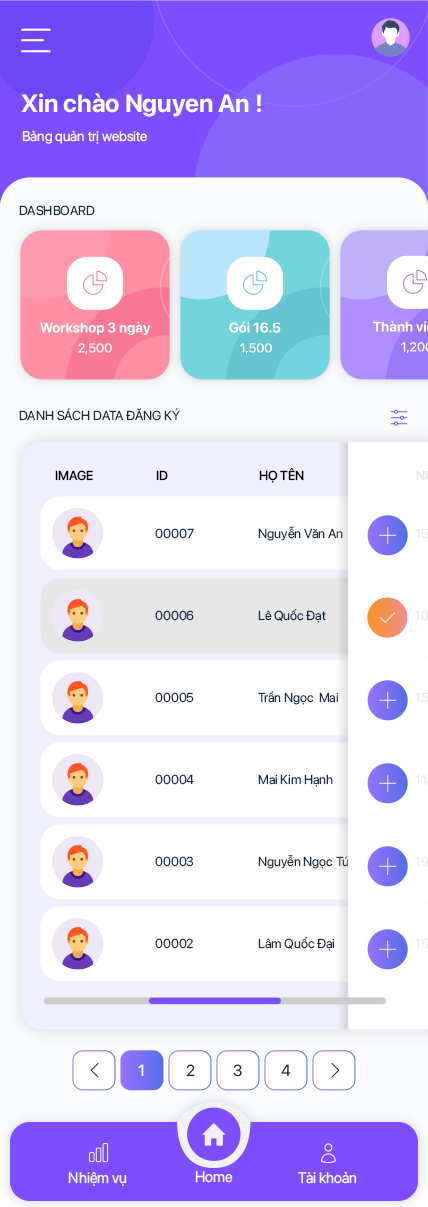
<style>
.page{position:relative;width:428px;height:1207px;background:#ffffff}
.page>*{position:absolute;margin:0}
.t1{font:25px "SFProDisplay-Bold";color:#ffffff}
.t2{font:14px "SFProDisplay-Regular";color:#ffffff}
.t3{font:13px "SFProDisplay-Regular";color:#172b4c}
.t4{font:13px "SFProDisplay-Medium";color:#000000}
.t5{font:15.9px "SFProDisplay-Regular";color:#ffffff}
.t6{font:15.9px "SFProDisplay-Regular";color:#172b4c}
.t7{font:15.3px "SFProDisplay-Regular";color:#fafcfe;scale:0.96 1}
</style>
<div class="page">
<p class="t1" style="left:21px;top:93px;width:240px;height:24px">Xin chào Nguyen An !</p>
<p class="t2" style="left:22px;top:130px;width:125px;height:14px">Bảng quản trị website</p>
<p class="t3" style="left:19px;top:205px;width:76px;height:11px">DASHBOARD</p>
<p class="t3" style="left:19px;top:408px;width:161px;height:13px">DANH SÁCH DATA ĐĂNG KÝ</p>
<p class="t4" style="left:55px;top:470px;width:38px;height:11px">IMAGE</p>
<p class="t4" style="left:156px;top:470px;width:12px;height:11px">ID</p>
<p class="t4" style="left:259px;top:468px;width:45px;height:15px">HỌ TÊN</p>
<p class="t3" style="left:155px;top:528px;width:39px;height:11px">00007</p>
<p class="t3" style="left:258px;top:526px;width:85px;height:15px">Nguyễn Văn An</p>
<p class="t3" style="left:155px;top:610px;width:39px;height:11px">00006</p>
<p class="t3" style="left:258px;top:609px;width:68px;height:14px">Lê Quốc Đạt</p>
<p class="t3" style="left:155px;top:692px;width:39px;height:11px">00005</p>
<p class="t3" style="left:258px;top:691px;width:81px;height:14px">Trần Ngọc  Mai</p>
<p class="t3" style="left:155px;top:774px;width:39px;height:11px">00004</p>
<p class="t3" style="left:258px;top:774px;width:75px;height:13px">Mai Kim Hạnh</p>
<p class="t3" style="left:155px;top:856px;width:39px;height:11px">00003</p>
<p class="t3" style="left:258px;top:855px;width:91px;height:14px">Nguyễn Ngọc Tú</p>
<p class="t3" style="left:155px;top:938px;width:38px;height:11px">00002</p>
<p class="t3" style="left:258px;top:937px;width:77px;height:14px">Lâm Quốc Đại</p>
<p class="t5" style="left:138px;top:1064px;width:6px;height:13px">1</p>
<p class="t6" style="left:186px;top:1064px;width:9px;height:13px">2</p>
<p class="t6" style="left:233px;top:1064px;width:9px;height:13px">3</p>
<p class="t6" style="left:281px;top:1064px;width:10px;height:13px">4</p>
<p class="t7" style="left:68px;top:1172px;width:59px;height:14px">Nhiệm vụ</p>
<p class="t7" style="left:195px;top:1171px;width:38px;height:12px">Home</p>
<p class="t7" style="left:298px;top:1171px;width:59px;height:13px">Tài khoản</p>
</div>
